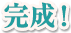
<style>
.page{position:relative;width:71px;height:33px;background:#fff6f2}
.page>*{position:absolute;margin:0}
.t1{font:27.3px "RyuminPro-ExBold";color:#239e9f;font-weight:bold;scale:0.95 1}
</style>
<div class="page">
<p class="t1" style="left:4px;top:2px;width:63px;height:26px">完成！</p>
</div>
